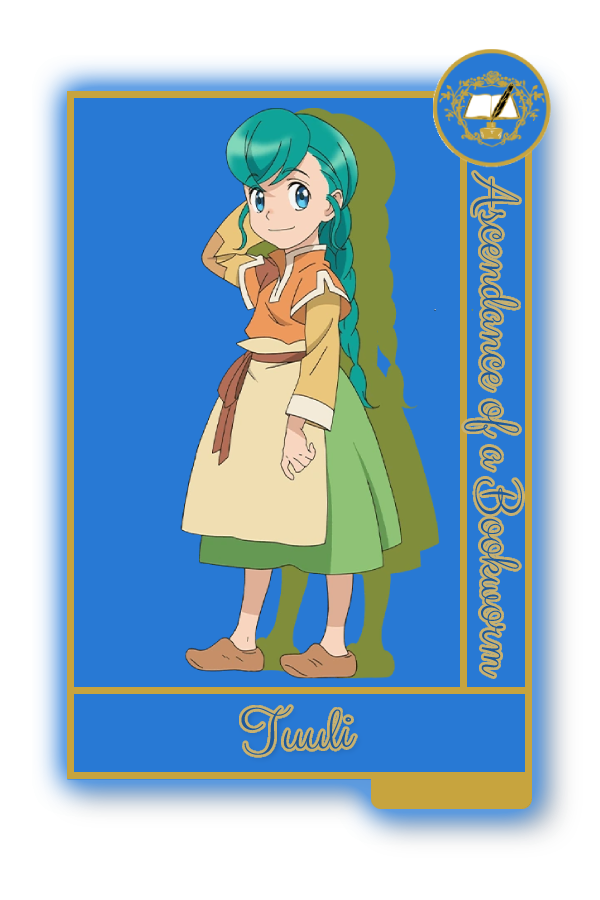
<style>
.page{position:relative;width:600px;height:900px;background:#2879d4}
.page>*{position:absolute;margin:0}
.t1{font:58px "ClickerScript-Regular";color:#1d599c}
.t2{font:60px "ClickerScript-Regular";color:#1d599c}
</style>
<div class="page">
<p class="t1" style="left:464px;top:172px;width:59px;height:505px;rotate:90deg">Ascendance of a Bookworm</p>
<p class="t2" style="left:241px;top:706px;width:115px;height:49px">Tuuli</p>
</div>
